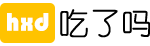
<style>
.page{position:relative;width:150px;height:46px;background:#ffffff}
.page>*{position:absolute;margin:0}
.t1{font:26.7px "STHupo";color:#ffffff}
.t2{font:30.7px "YouYuan";color:#000000;font-weight:bold}
</style>
<div class="page">
<p class="t1" style="left:7px;top:13px;width:42px;height:18px">hxd</p>
<p class="t2" style="left:60px;top:9px;width:91px;height:29px">吃了吗</p>
</div>
